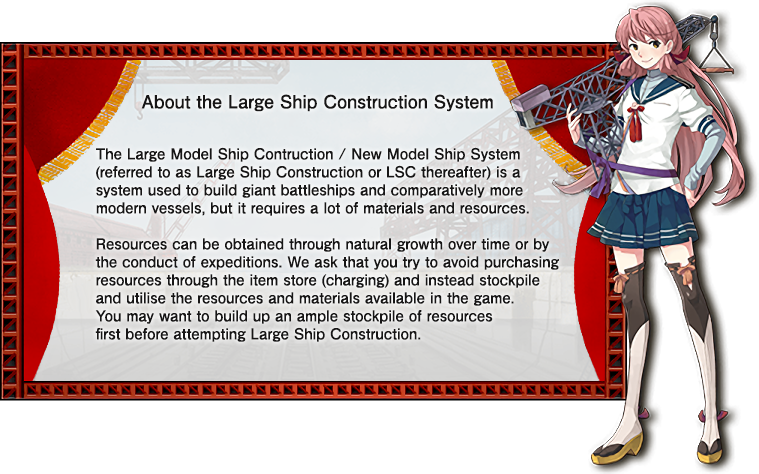
<style>
.page{position:relative;width:759px;height:474px;background:#ffffff}
.page>*{position:absolute;margin:0}
.t1{font:18px "FutoGoB101Pr5-Bold";color:#171616}
.t2{font:15px/18px "FutoGoB101Pr5-Bold";color:#171616}
</style>
<div class="page">
<p class="t1" style="left:141px;top:94px;width:352px;height:18px">About the Large Ship Construction System</p>
<p class="t2" style="left:95px;top:147px;width:464px;height:195px">The Large Model Ship Contruction / New Model Ship System<br>(referred to as Large Ship Construction or LSC thereafter) is a<br>system used to build giant battleships and comparatively more<br>modern vessels, but it requires a lot of materials and resources.<br><br>Resources can be obtained through natural growth over time or by<br>the conduct of expeditions. We ask that you try to avoid purchasing<br>resources through the item store (charging) and instead stockpile<br>and utilise the resources and materials available in the game.<br>You may want to build up an ample stockpile of resources<br>first before attempting Large Ship Construction.</p>
</div>
